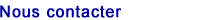
<style>
.page{position:relative;width:205px;height:20px;background:#ffffff}
.page>*{position:absolute;margin:0}
.t1{font:16px "ArialMT";letter-spacing:0.04em;color:#000099;font-weight:bold}
</style>
<div class="page">
<p class="t1" style="left:0px;top:5px;width:122px;height:13px">Nous contacter</p>
</div>
